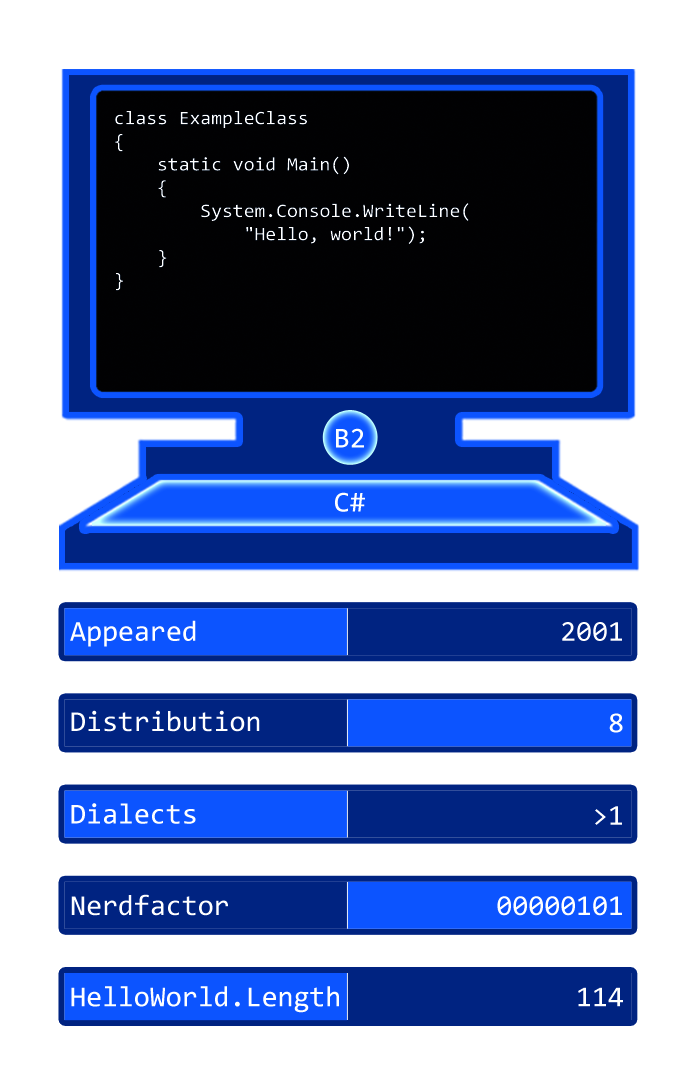
<style>
.page{position:relative;width:697px;height:1087px;background:#ffffff}
.page>*{position:absolute;margin:0}
.t1{font:19.3px "Consolas";color:#ffffff}
.t2{font:29px "Consolas";color:#ffffff}
</style>
<div class="page">
<p class="t1" style="left:115px;top:111px;width:354px;height:180px">class ExampleClass<br>{<br>    static void Main()<br>    {<br>        System.Console.WriteLine(<br>            "Hello, world!");<br>    }<br>}</p>
<p class="t2" style="left:336px;top:428px;width:28px;height:20px">B2</p>
<p class="t2" style="left:335px;top:492px;width:30px;height:20px">C#</p>
<p class="t2" style="left:70px;top:620px;width:126px;height:27px">Appeared</p>
<p class="t2" style="left:562px;top:622px;width:60px;height:19px">2001</p>
<p class="t2" style="left:71px;top:710px;width:189px;height:22px">Distribution</p>
<p class="t2" style="left:609px;top:713px;width:14px;height:20px">8</p>
<p class="t2" style="left:71px;top:803px;width:125px;height:21px">Dialects</p>
<p class="t2" style="left:595px;top:806px;width:27px;height:19px">&gt;1</p>
<p class="t2" style="left:71px;top:894px;width:157px;height:22px">Nerdfactor</p>
<p class="t2" style="left:497px;top:896px;width:125px;height:20px">00000101</p>
<p class="t2" style="left:71px;top:986px;width:268px;height:27px">HelloWorld.Length</p>
<p class="t2" style="left:578px;top:987px;width:45px;height:20px">114</p>
</div>
